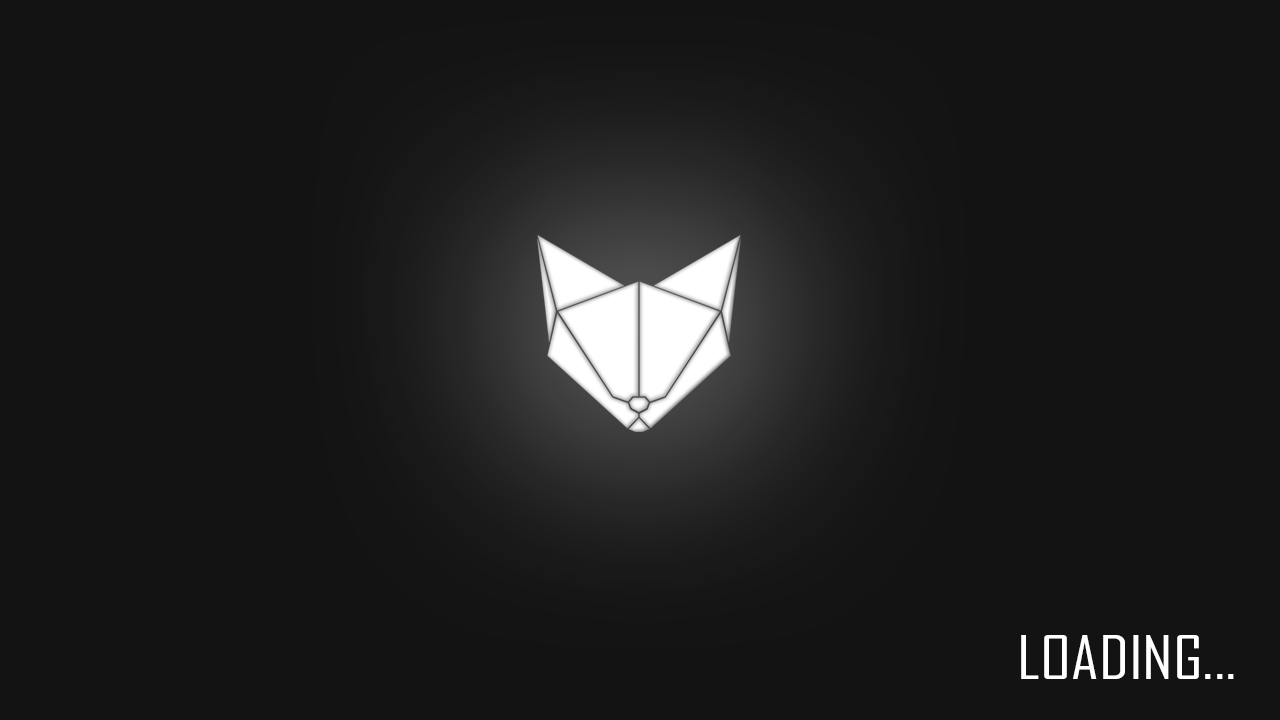
<style>
.page{position:relative;width:1280px;height:720px;background:#131313}
.page>*{position:absolute;margin:0}
.t1{font:57.6px "AgencyFB-Reg";color:#ffffff;text-transform:uppercase;scale:1.2 1}
</style>
<div class="page">
<p class="t1" style="left:1021px;top:635px;width:213px;height:44px">Loading...</p>
</div>
